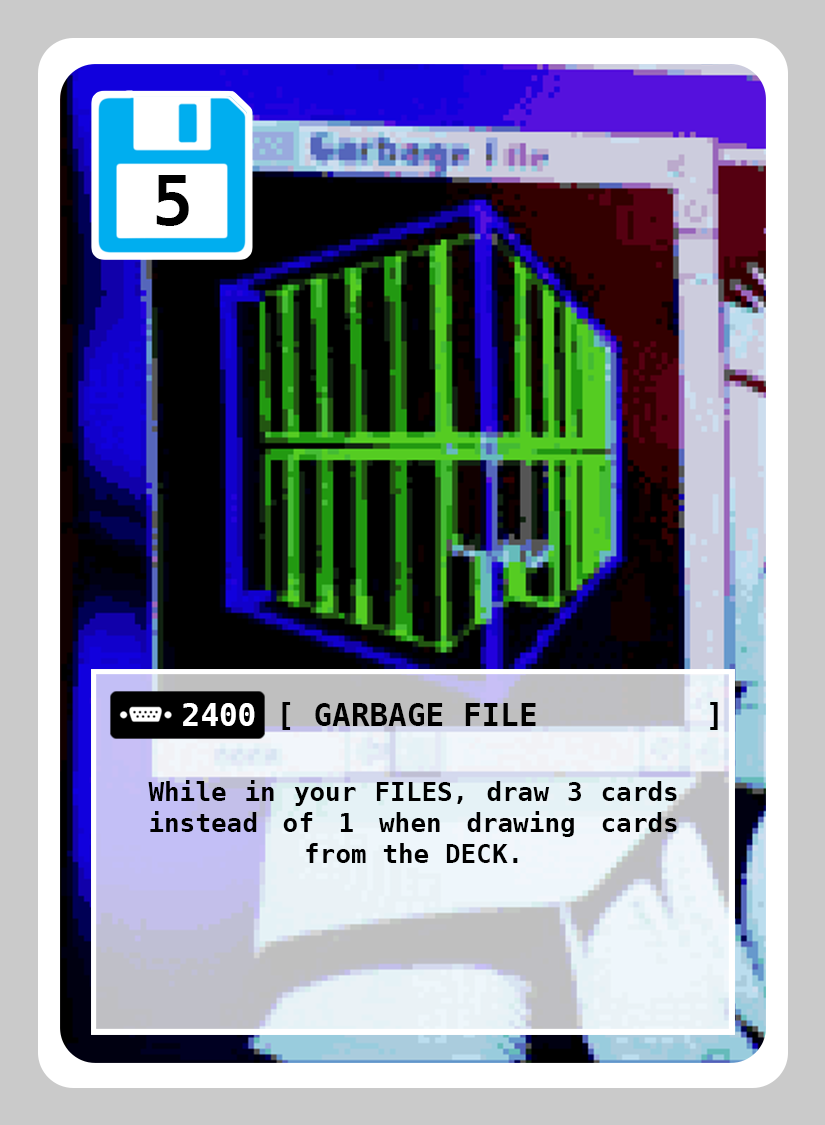
<style>
.page{position:relative;width:825px;height:1125px}
.page>*{position:absolute;margin:0}
.t1{font:69px "DejaVuSansMono-Bold";color:#000000}
.t2{font:31px "DejaVuSansMono-Bold";color:#ffffff}
.t3{font:31px "DejaVuSansMono-Bold";color:#000000}
.t4{font:26px "DejaVuSansMono-Bold";color:#000000}
</style>
<div class="page">
<p class="t1" style="left:156px;top:175px;width:33px;height:51px">5</p>
<p class="t2" style="left:183px;top:703px;width:72px;height:23px">2400</p>
<p class="t3" style="left:315px;top:703px;width:221px;height:23px">GARBAGE FILE</p>
<p class="t4" style="left:148px;top:780px;width:529px;height:83px;text-align:justify">While in your FILES, draw 3 cards instead of 1 when drawing cards from the DECK.</p>
</div>
